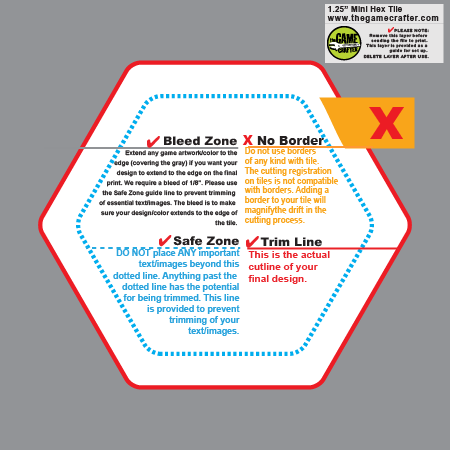
<style>
.page{position:relative;width:450px;height:450px;background:#929497}
.page>*{position:absolute;margin:0}
.t1{font:8.5px/9.7px "Arial-BoldMT";letter-spacing:0.05em;color:#231f20}
.t2{font:8.5px/9.7px "Arial-BoldMT";color:#231f20}
.t3{font:4.3px "Arial-Black";color:#231f20}
.t4{font:44.7px "Arial-Black";color:#ec1c24}
.t5{font:6.3px/10.1px "Arial-BoldMT";color:#231f20}
.t6{font:7.6px "Arial-Black";color:#231f20}
.t7{font:12.1px "Arial-Black";color:#231f20}
.t8{font:12.9px "Arial-Black";color:#ec1c24}
.t9{font:8.8px/9.8px "Arial-BoldMT";color:#f9a51a;scale:0.88 1}
.t10{font:12.1px "Arial-Black";letter-spacing:0.025em;color:#231f20}
.t11{font:8.8px/11.1px "Arial-BoldMT";color:#2ba4dd}
.t12{font:12.1px/11.1px "Arial-Black";color:#231f20}
.t13{font:10.1px "Arial-BoldMT";color:#ea222a}
</style>
<div class="page">
<p class="t1" style="left:327px;top:6px;width:112px;height:17px"><span class="t2">1.25” Mini Hex Tile<br></span>www.thegamecrafter.com</p>
<p class="t3" style="left:363px;top:28px;width:66px;height:31px;text-align:right">PLEASE NOTE:<br>Remove this layer before <br>sending the file to print. <br>This layer is provided as a <br>guide for set up. <br>DELETE LAYER AFTER USE.</p>
<p class="t4" style="left:369px;top:107px;width:35px;height:32px">X</p>
<p class="t5" style="left:99px;top:136px;width:139px;height:90px;text-align:right"><span class="t6">    </span><span class="t7">Bleed Zone<br></span>Extend any game artwork/color to the<br>edge (covering the gray) if you want your<br>design to extend to the edge on the final<br>print. We require a bleed of 1/8”. Please use<br>the Safe Zone guide line to prevent trimming <br>of essential text/images. The bleed is to make <br>sure your design/color extends to the edge of<br>the tile.</p>
<p class="t8" style="left:242px;top:135px;width:11px;height:10px">X</p>
<p class="t9" style="left:244px;top:136px;width:94px;height:89px"><span class="t7">   No Bo</span><span class="t10">r</span><span class="t7">der<br></span>Do not use borders <br>of any kind with tile. <br>The cutting registration<br>on tiles is not compatible <br>with borders. Adding a <br>border to your tile will <br>magnifythe drift in the <br>cutting process.</p>
<p class="t11" style="left:113px;top:236px;width:127px;height:100px;text-align:right"><span class="t12">Safe Zone<br></span>DO NOT place ANY important<br>text/images beyond this<br>dotted line. Anything past the <br>dotted line has the potential<br> for being trimmed. This line<br>is provided to prevent<br>trimming of your<br>text/images.</p>
<p class="t13" style="left:248px;top:237px;width:82px;height:47px"><span class="t7">   Trim Line<br></span>This is the actual <br>cutline of your <br>final design.</p>
</div>
